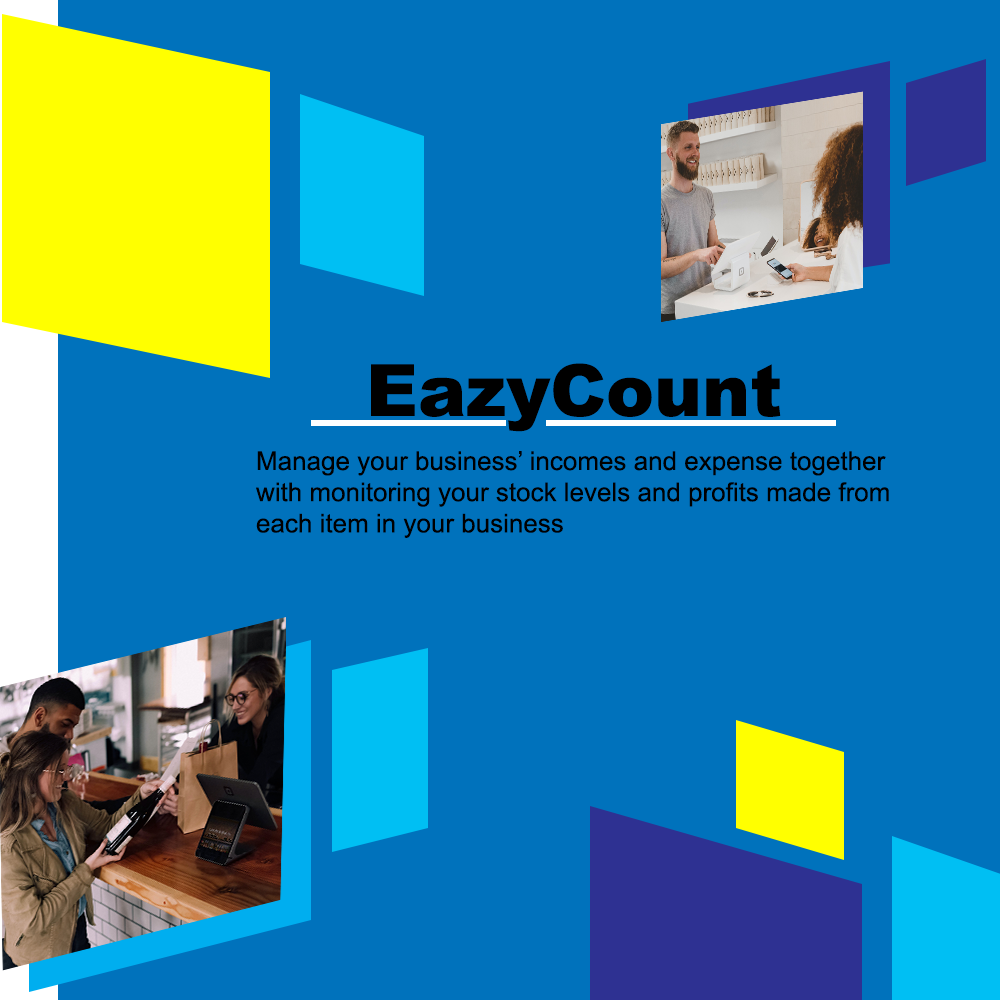
<style>
.page{position:relative;width:1000px;height:1000px;background:#0072bc}
.page>*{position:absolute;margin:0}
.t1{font:72px "Arial-Black";color:#000000}
.t2{font:26px "ArialMT";color:#000000}
</style>
<div class="page">
<p class="t1" style="left:371px;top:363px;width:410px;height:69px">EazyCount</p>
<p class="t2" style="left:256px;top:451px;width:633px;height:87px">Manage your business’ incomes and expense together<br>with monitoring your stock levels and profits made from<br>each item in your business</p>
</div>
